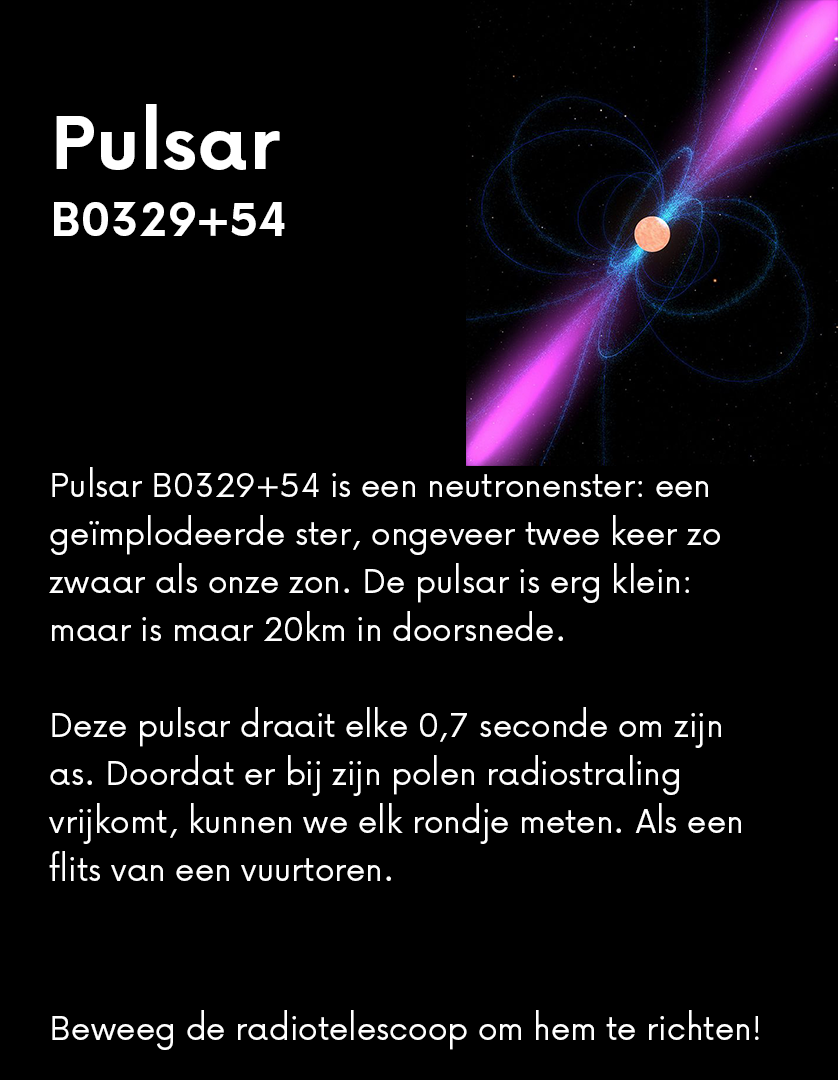
<style>
.page{position:relative;width:838px;height:1080px;background:#000000}
.page>*{position:absolute;margin:0}
.t1{font:56px "Now-Bold";color:#ffffff}
.t2{font:88.4px "Now-Bold";color:#ffffff}
.t3{font:40px "Now-Regular";color:#ffffff}
</style>
<div class="page">
<p class="t1" style="left:54px;top:104px;width:231px;height:132px"><span class="t2">Pulsar<br></span>B0329+54</p>
<p class="t3" style="left:49px;top:467px;width:692px;height:414px">Pulsar B0329+54 is een neutronenster: een geïmplodeerde ster, ongeveer twee keer zo zwaar als onze zon. De pulsar is erg klein: maar is maar 20km in doorsnede.<br><br>Deze pulsar draait elke 0,7 seconde om zijn as. Doordat er bij zijn polen radiostraling vrijkomt, kunnen we elk rondje meten. Als een flits van een vuurtoren.</p>
<p class="t3" style="left:52px;top:1010px;width:707px;height:40px">Beweeg de radiotelescoop om hem te richten!</p>
</div>
